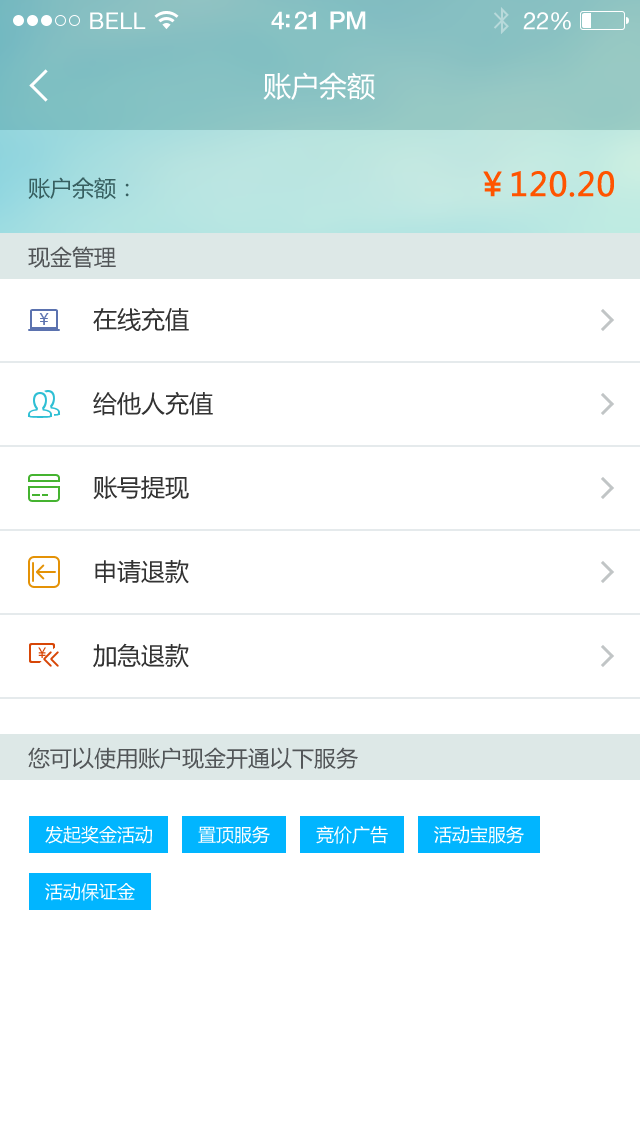
<style>
.page{position:relative;width:640px;height:1136px;background:#ffffff}
.page>*{position:absolute;margin:0}
.t1{font:23px "HelveticaNeue";letter-spacing:0.02em;color:#ffffff}
.t2{font:25px "HelveticaNeue-Medium";letter-spacing:-0.02em;color:#ffffff}
.t3{font:24px "HelveticaNeue";letter-spacing:-0.02em;color:#ffffff}
.t4{font:28px "MicrosoftYaHei";color:#ffffff}
.t5{font:32px "MicrosoftYaHei";color:#ff5400;font-weight:bold}
.t6{font:22px "MicrosoftYaHei";color:#375f60}
.t7{font:22px "MicrosoftYaHei";color:#525658}
.t8{font:16px "MicrosoftYaHei";color:#5b72af}
.t9{font:24px "MicrosoftYaHei";color:#333333}
.t10{font:14px "MicrosoftYaHei";color:#d74607}
.t11{font:18px "MicrosoftYaHei";color:#ffffff}
</style>
<div class="page">
<p class="t1" style="left:90px;top:12px;width:56px;height:17px">BELL</p>
<p class="t2" style="left:271px;top:11px;width:95px;height:19px">4:21 PM</p>
<p class="t3" style="left:523px;top:12px;width:48px;height:18px">22%</p>
<p class="t4" style="left:263px;top:72px;width:112px;height:28px">账户余额</p>
<p class="t5" style="left:483px;top:171px;width:131px;height:26px">￥120.20</p>
<p class="t6" style="left:28px;top:177px;width:101px;height:23px">账户余额：</p>
<p class="t7" style="left:28px;top:246px;width:88px;height:22px">现金管理</p>
<p class="t8" style="left:39px;top:313px;width:10px;height:12px">￥</p>
<p class="t9" style="left:93px;top:307px;width:96px;height:25px">在线充值</p>
<p class="t9" style="left:93px;top:391px;width:120px;height:25px">给他人充值</p>
<p class="t9" style="left:93px;top:476px;width:96px;height:24px">账号提现</p>
<p class="t9" style="left:95px;top:559px;width:94px;height:25px">申请退款</p>
<p class="t10" style="left:38px;top:647px;width:8px;height:11px">￥</p>
<p class="t9" style="left:93px;top:643px;width:96px;height:25px">加急退款</p>
<p class="t7" style="left:28px;top:747px;width:330px;height:22px">您可以使用账户现金开通以下服务</p>
<p class="t11" style="left:45px;top:826px;width:107px;height:18px">发起奖金活动</p>
<p class="t11" style="left:198px;top:826px;width:72px;height:18px">置顶服务</p>
<p class="t11" style="left:316px;top:825px;width:72px;height:19px">竞价广告</p>
<p class="t11" style="left:434px;top:826px;width:90px;height:18px">活动宝服务</p>
<p class="t11" style="left:45px;top:883px;width:90px;height:18px">活动保证金</p>
</div>
